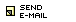
<style>
.page{position:relative;width:76px;height:22px;background:#ffffff}
.page>*{position:absolute;margin:0}
.t1{font:8px/8px "Sevenet7";color:#000000}
</style>
<div class="page">
<p class="t1" style="left:20px;top:5px;width:27px;height:13px">SEND<br>E-MAIL</p>
</div>
